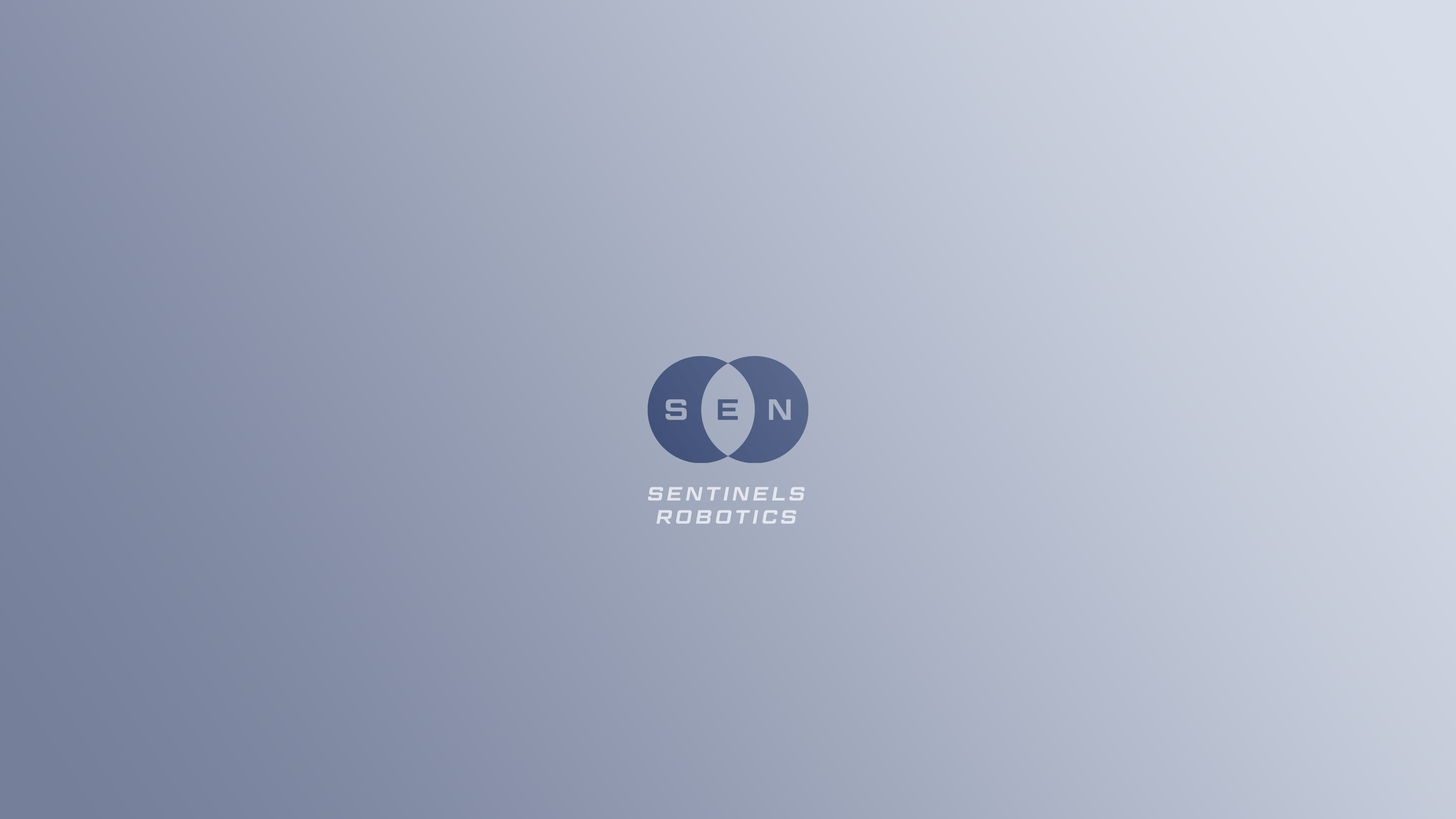
<style>
.page{position:relative;width:1456px;height:819px}
.page>*{position:absolute;margin:0}
.t1{font:19.2px "GeomGraphicW03-SemiBoldIt";letter-spacing:0.2em;color:#d9dadc}
</style>
<div class="page">
<p class="t1" style="left:648px;top:487px;width:157px;height:37px;text-align:center">SENTINELS<br>ROBOTICS</p>
</div>
